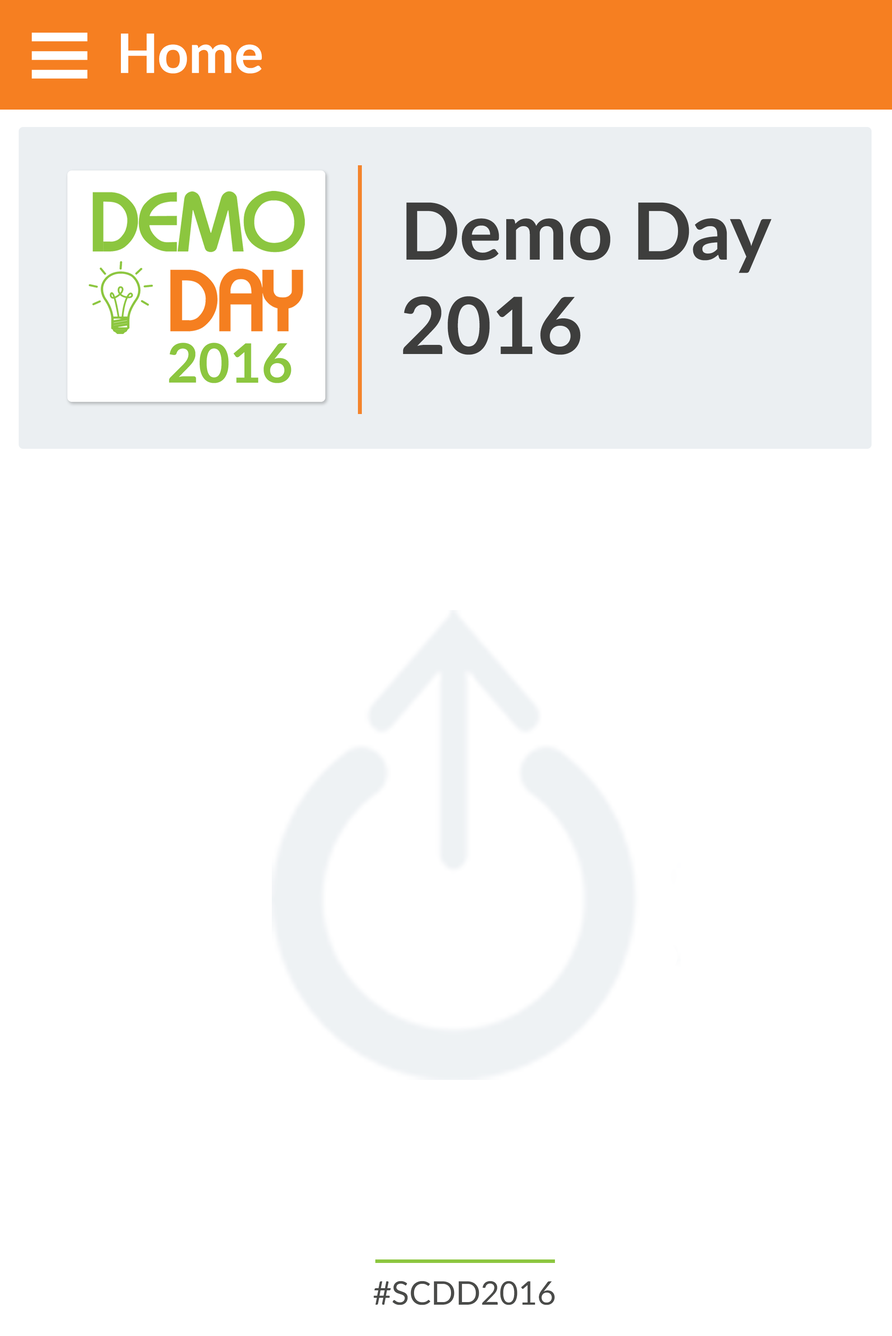
<style>
.page{position:relative;width:892px;height:1336px;background:#ffffff}
.page>*{position:absolute;margin:0}
.t1{font:54.4px "Lato-Bold";color:#ffffff}
.t2{font:78.9px "Lato-Bold";color:#3e3e3d}
.t3{font:54.4px "Lato-Bold";color:#8cc63f}
.t4{font:32.6px "Lato-Regular";color:#4a4b49}
</style>
<div class="page">
<p class="t1" style="left:121px;top:33px;width:141px;height:41px">Home</p>
<p class="t2" style="left:403px;top:202px;width:369px;height:153px">Demo Day <br>2016</p>
<p class="t3" style="left:169px;top:343px;width:122px;height:40px">2016</p>
<p class="t4" style="left:374px;top:1281px;width:181px;height:25px">#SCDD2016</p>
</div>
